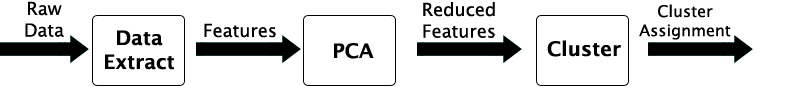
<style>
.page{position:relative;width:800px;height:101px;background:#ffffff}
.page>*{position:absolute;margin:0}
.t1{font:18px "LucidaGrande";color:#000000}
.t2{font:16px "LucidaGrande";color:#000000}
.t3{font:20px "LucidaGrande-Bold";color:#000000}
</style>
<div class="page">
<p class="t1" style="left:25px;top:1px;width:39px;height:36px;text-align:center">Raw<br>Data</p>
<p class="t1" style="left:423px;top:2px;width:72px;height:36px;text-align:center">Reduced<br>Features</p>
<p class="t2" style="left:639px;top:4px;width:92px;height:36px;text-align:center">Cluster<br>Assignment</p>
<p class="t3" style="left:105px;top:30px;width:69px;height:40px;text-align:center">Data<br>Extract</p>
<p class="t1" style="left:204px;top:23px;width:72px;height:15px">Features</p>
<p class="t3" style="left:547px;top:40px;width:74px;height:17px">Cluster</p>
<p class="t3" style="left:334px;top:43px;width:40px;height:16px">PCA</p>
</div>
